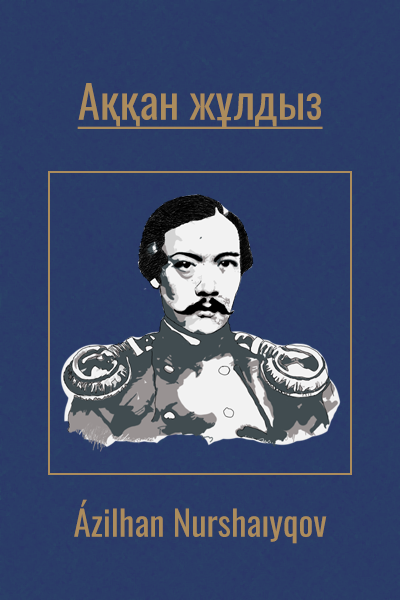
<style>
.page{position:relative;width:400px;height:600px}
.page>*{position:absolute;margin:0}
.t1{font:45px "Oswald-Regular";color:#ac8c5c;text-decoration:underline}
.t2{font:35px "Oswald-Regular";color:#ac8c5c}
</style>
<div class="page">
<p class="t1" style="left:77px;top:83px;width:246px;height:46px">Аққан жұлдыз</p>
<p class="t2" style="left:74px;top:499px;width:253px;height:45px">Ázіlhan Nurshaıyqov</p>
</div>
